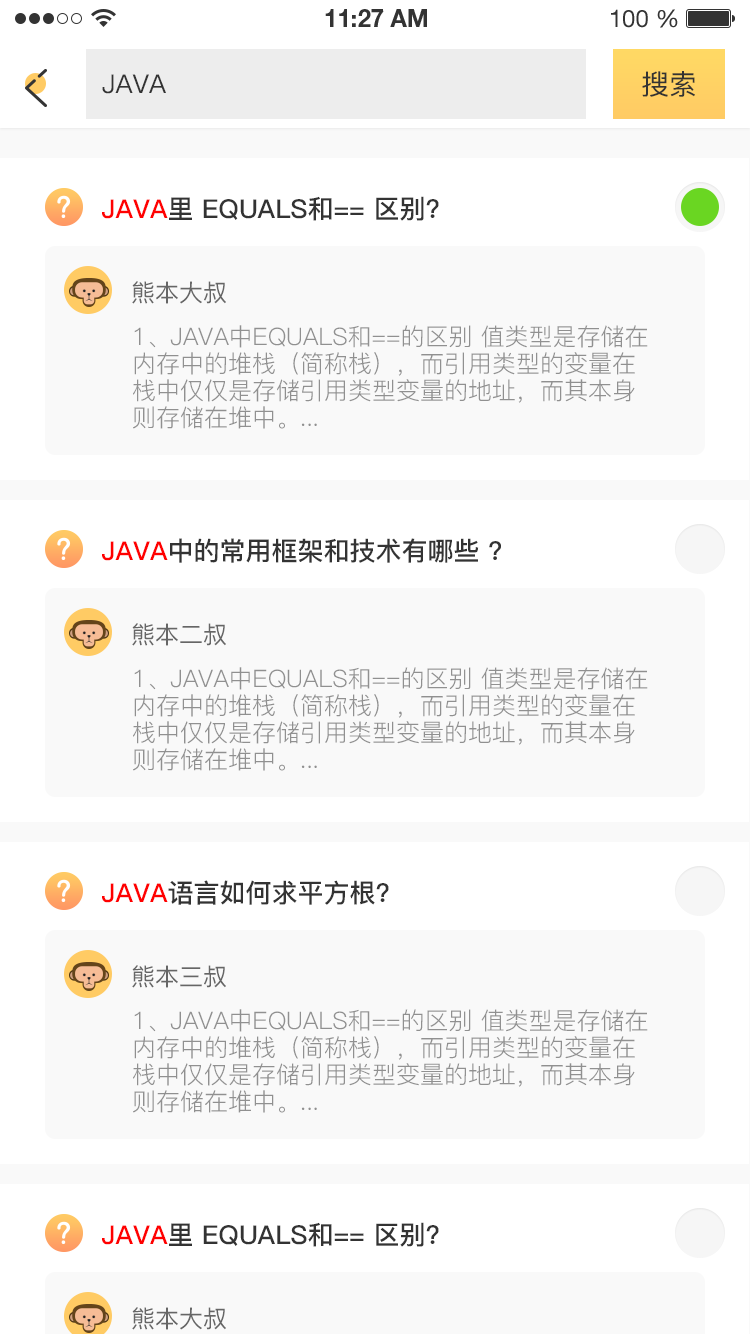
<style>
.page{position:relative;width:750px;height:1334px;background:#f9f9f9}
.page>*{position:absolute;margin:0}
.t1{font:26px "PingFang-SC-Medium";color:#333333;text-transform:uppercase}
.t2{font:28px "PingFang-SC-Medium";color:#333333;text-transform:uppercase}
.t3{font:26px "PingFang-SC-Bold";color:#333333;text-transform:uppercase}
.t4{font:26px "PingFang-SC-Bold";color:#ff0101;text-transform:uppercase}
.t5{font:24px "PingFang-SC-Medium";color:#666666;text-transform:uppercase}
.t6{font:24px/27px "PingFang-SC-Regular";color:#909090;text-transform:uppercase}
.t7{font:26px "PingFang-SC-Bold";color:#ff0000;text-transform:uppercase}
</style>
<div class="page">
<p class="t1" style="left:102px;top:74px;width:64px;height:20px">java</p>
<p class="t2" style="left:642px;top:71px;width:53px;height:26px">搜索</p>
<p class="t3" style="left:102px;top:196px;width:337px;height:25px"><span class="t4">java</span>里 equals和== 区别?</p>
<p class="t5" style="left:132px;top:281px;width:94px;height:23px">熊本大叔</p>
<p class="t6" style="left:133px;top:325px;width:515px;height:104px">1、java中equals和==的区别 值类型是存储在内存中的堆栈（简称栈），而引用类型的变量在栈中仅仅是存储引用类型变量的地址，而其本身则存储在堆中。...</p>
<p class="t3" style="left:102px;top:538px;width:399px;height:25px"><span class="t7">Java</span>中的常用框架和技术有哪些 ?</p>
<p class="t5" style="left:132px;top:623px;width:94px;height:23px">熊本二叔</p>
<p class="t6" style="left:133px;top:667px;width:515px;height:104px">1、java中equals和==的区别 值类型是存储在内存中的堆栈（简称栈），而引用类型的变量在栈中仅仅是存储引用类型变量的地址，而其本身则存储在堆中。...</p>
<p class="t3" style="left:102px;top:880px;width:287px;height:25px"><span class="t7">java</span>语言如何求平方根?</p>
<p class="t5" style="left:132px;top:965px;width:94px;height:23px">熊本三叔</p>
<p class="t6" style="left:133px;top:1009px;width:515px;height:104px">1、java中equals和==的区别 值类型是存储在内存中的堆栈（简称栈），而引用类型的变量在栈中仅仅是存储引用类型变量的地址，而其本身则存储在堆中。...</p>
<p class="t3" style="left:102px;top:1222px;width:337px;height:25px"><span class="t7">java</span>里 equals和== 区别?</p>
<p class="t5" style="left:132px;top:1307px;width:94px;height:23px">熊本大叔</p>
</div>
